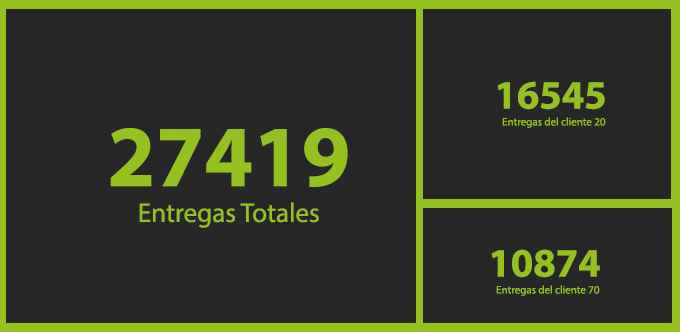
<style>
.page{position:relative;width:680px;height:332px;background:#272727}
.page>*{position:absolute;margin:0}
.t1{font:40.4px "MyriadPro-Bold";color:#94c11f}
.t2{font:11px "MyriadPro-Regular";color:#94c11f}
.t3{font:87.7px "MyriadPro-Bold";color:#94c11f}
.t4{font:27.1px "MyriadPro-Regular";color:#94c11f}
</style>
<div class="page">
<p class="t1" style="left:497px;top:81px;width:108px;height:29px">16545</p>
<p class="t2" style="left:502px;top:117px;width:104px;height:11px">Entregas del cliente 20</p>
<p class="t3" style="left:110px;top:128px;width:238px;height:59px">27419</p>
<p class="t4" style="left:139px;top:202px;width:180px;height:26px">Entregas Totales</p>
<p class="t1" style="left:491px;top:249px;width:109px;height:29px">10874</p>
<p class="t2" style="left:496px;top:285px;width:104px;height:11px">Entregas del cliente 70</p>
</div>
